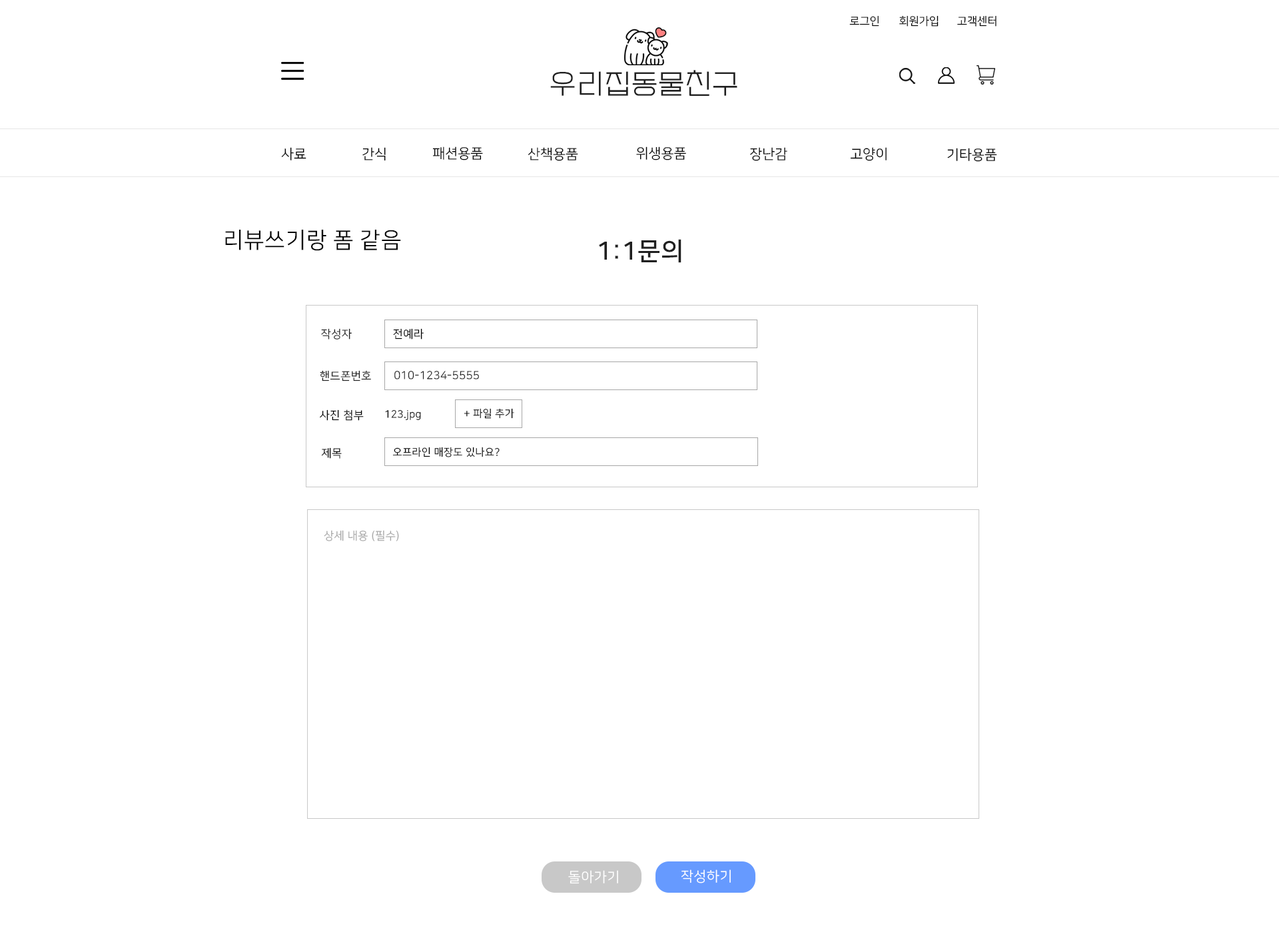
<style>
.page{position:relative;width:1279px;height:932px;background:#ffffff}
.page>*{position:absolute;margin:0}
.t1{font:11.1px "NanumSquareR";color:#000000}
.t2{font:27.8px "EF_watermelonSalad";letter-spacing:0.025em;color:#202020}
.t3{font:13.9px "NanumSquareR";color:#000000}
.t4{font:22.2px "NanumSquareR";letter-spacing:0.025em;color:#000000}
.t5{font:25px "NanumSquareB";letter-spacing:0.025em;color:#202020}
.t6{font:11.1px "NanumSquareR";letter-spacing:0.025em;color:#202020}
.t7{font:11.1px "NanumSquareR";letter-spacing:0.025em;color:#000000}
.t8{font:10.3px "NanumSquareR";letter-spacing:0.025em;color:#000000}
.t9{font:11.1px "NanumSquareR";letter-spacing:0.025em;color:#a8a8a8}
.t10{font:13.9px "NanumSquareR";letter-spacing:0.025em;color:#ffffff}
</style>
<div class="page">
<p class="t1" style="left:849px;top:15px;width:30px;height:12px">로그인</p>
<p class="t1" style="left:899px;top:15px;width:39px;height:12px">회원가입</p>
<p class="t1" style="left:957px;top:15px;width:39px;height:12px">고객센터</p>
<p class="t2" style="left:550px;top:70px;width:187px;height:26px">우리집동물친구</p>
<p class="t3" style="left:281px;top:147px;width:25px;height:14px">사료</p>
<p class="t3" style="left:362px;top:147px;width:24px;height:14px">간식</p>
<p class="t3" style="left:432px;top:147px;width:51px;height:14px">패션용품</p>
<p class="t3" style="left:528px;top:147px;width:50px;height:14px">산책용품</p>
<p class="t3" style="left:636px;top:147px;width:50px;height:14px">위생용품</p>
<p class="t3" style="left:750px;top:147px;width:37px;height:14px">장난감</p>
<p class="t3" style="left:850px;top:147px;width:37px;height:14px">고양이</p>
<p class="t3" style="left:947px;top:148px;width:50px;height:14px">기타용품</p>
<p class="t4" style="left:225px;top:230px;width:176px;height:21px">리뷰쓰기랑 폼 같음</p>
<p class="t5" style="left:599px;top:239px;width:82px;height:24px">1:1문의</p>
<p class="t6" style="left:321px;top:328px;width:31px;height:12px">작성자</p>
<p class="t7" style="left:393px;top:328px;width:31px;height:12px">전예라</p>
<p class="t6" style="left:320px;top:370px;width:51px;height:12px">핸드폰번호</p>
<p class="t6" style="left:394px;top:371px;width:85px;height:9px">010-1234-5555</p>
<p class="t7" style="left:320px;top:410px;width:44px;height:11px">사진 첨부</p>
<p class="t8" style="left:385px;top:410px;width:36px;height:10px">123.jpg</p>
<p class="t8" style="left:464px;top:408px;width:50px;height:11px">+ 파일 추가</p>
<p class="t7" style="left:321px;top:448px;width:21px;height:11px">제목</p>
<p class="t8" style="left:392px;top:447px;width:108px;height:11px">오프라인 매장도 있나요?</p>
<p class="t9" style="left:324px;top:530px;width:75px;height:11px">상세 내용 (필수)</p>
<p class="t10" style="left:681px;top:870px;width:50px;height:14px">작성하기</p>
<p class="t10" style="left:568px;top:871px;width:50px;height:14px">돌아가기</p>
</div>
